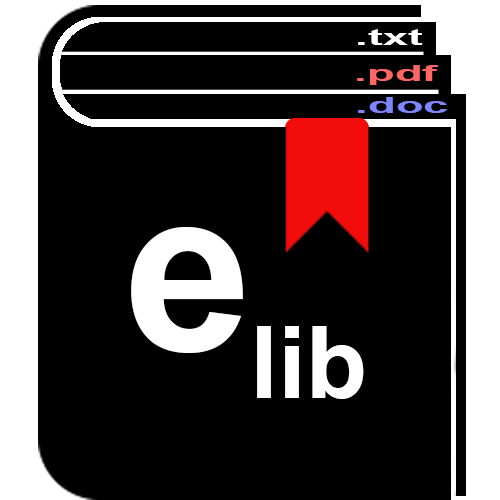
<style>
.page{position:relative;width:500px;height:500px;background:#000000}
.page>*{position:absolute;margin:0}
.t1{font:22px "Arial-BoldMT";color:#ffffff;scale:2.07 1}
.t2{font:22px "Arial-BoldMT";color:#ff6767;scale:2.07 1}
.t3{font:22px "Arial-BoldMT";color:#7d86ff;scale:2.07 1}
.t4{font:230px "Arial-BoldMT";color:#ffffff}
.t5{font:100px "Arial-BoldMT";color:#ffffff}
</style>
<div class="page">
<p class="t1" style="left:358px;top:29px;width:65px;height:16px">.txt</p>
<p class="t2" style="left:357px;top:65px;width:82px;height:20px">.pdf</p>
<p class="t3" style="left:358px;top:97px;width:89px;height:16px">.doc</p>
<p class="t4" style="left:131px;top:227px;width:112px;height:126px">e</p>
<p class="t5" style="left:257px;top:326px;width:107px;height:73px">lib</p>
</div>
